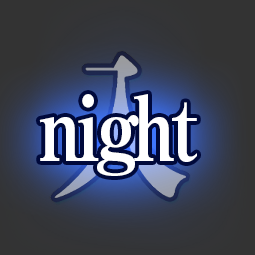
<style>
.page{position:relative;width:255px;height:255px}
.page>*{position:absolute;margin:0}
.t1{font:90px "RyuminPro-ExBold";letter-spacing:-0.08em;color:#ffffff;scale:0.85 1}
</style>
<div class="page">
<p class="t1" style="left:39px;top:94px;width:158px;height:82px">night</p>
</div>
